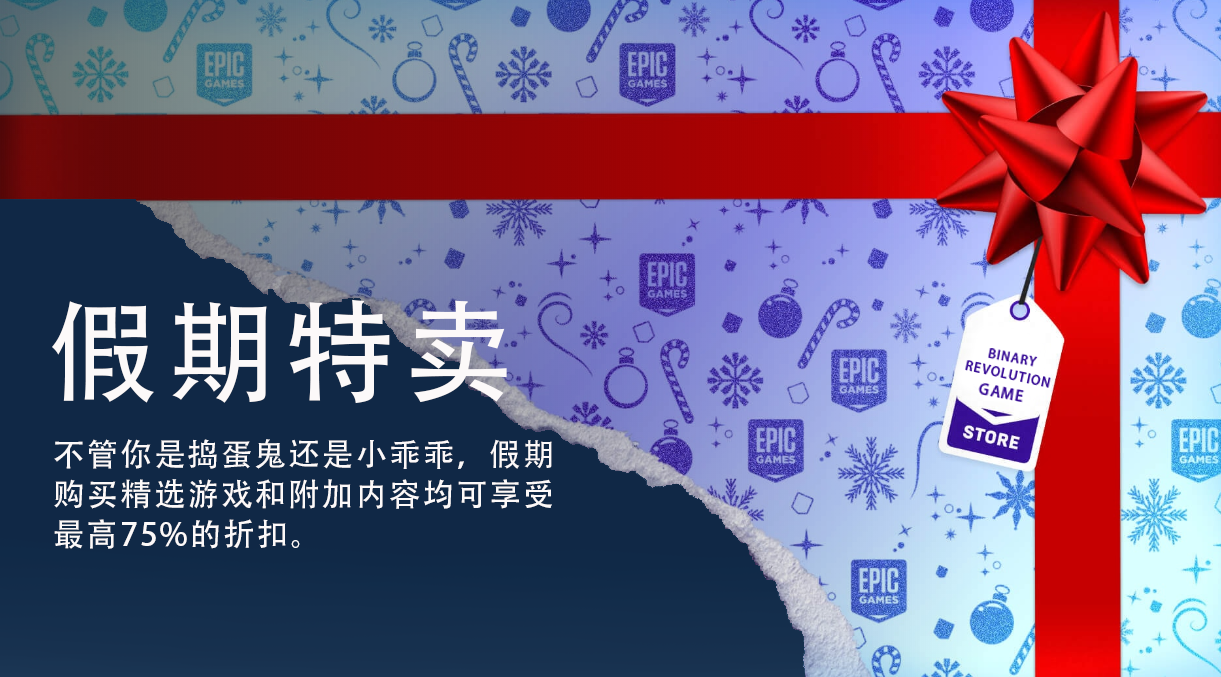
<style>
.page{position:relative;width:1221px;height:677px}
.page>*{position:absolute;margin:0}
.t1{font:111.7px "AdobeHeitiStd-Regular";letter-spacing:0.06em;color:#fcf9f9}
.t2{font:31.7px/40px "AdobeHeitiStd-Regular";letter-spacing:0.06em;color:#fcf9f9}
</style>
<div class="page">
<p class="t1" style="left:52px;top:299px;width:455px;height:105px">假期特卖</p>
<p class="t2" style="left:54px;top:439px;width:498px;height:110px">不管你是捣蛋鬼还是小乖乖，假期<br>购买精选游戏和附加内容均可享受<br>最高75%的折扣。</p>
</div>
